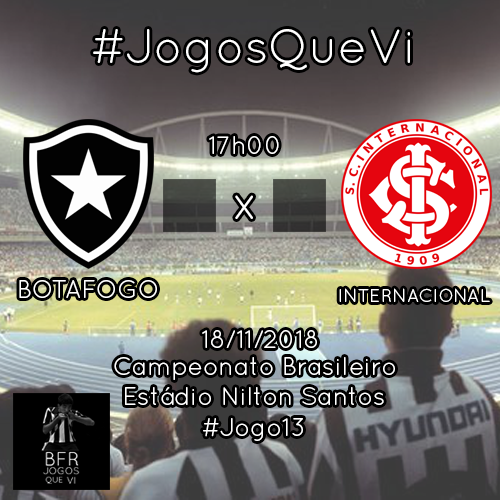
<style>
.page{position:relative;width:500px;height:500px}
.page>*{position:absolute;margin:0}
.t1{font:48px "QuicksandBook-Regular";color:#ffffff}
.t2{font:25px "QuicksandBook-Regular";color:#ffffff}
.t3{font:18.8px "QuicksandBook-Regular";color:#ffffff}
</style>
<div class="page">
<p class="t1" style="left:93px;top:29px;width:317px;height:44px">#JogosQueVi</p>
<p class="t2" style="left:209px;top:136px;width:70px;height:18px">17h00</p>
<p class="t1" style="left:235px;top:195px;width:18px;height:24px">x</p>
<p class="t2" style="left:19px;top:280px;width:138px;height:18px">BOTAFOGO</p>
<p class="t3" style="left:339px;top:288px;width:151px;height:14px">INTERNACIONAL</p>
<p class="t2" style="left:202px;top:330px;width:115px;height:18px">18/11/2018</p>
<p class="t2" style="left:114px;top:357px;width:281px;height:23px">Campeonato Brasileiro</p>
<p class="t2" style="left:125px;top:387px;width:259px;height:18px">Estádio Nilton Santos</p>
<p class="t2" style="left:203px;top:418px;width:100px;height:23px">#Jogo13</p>
</div>
